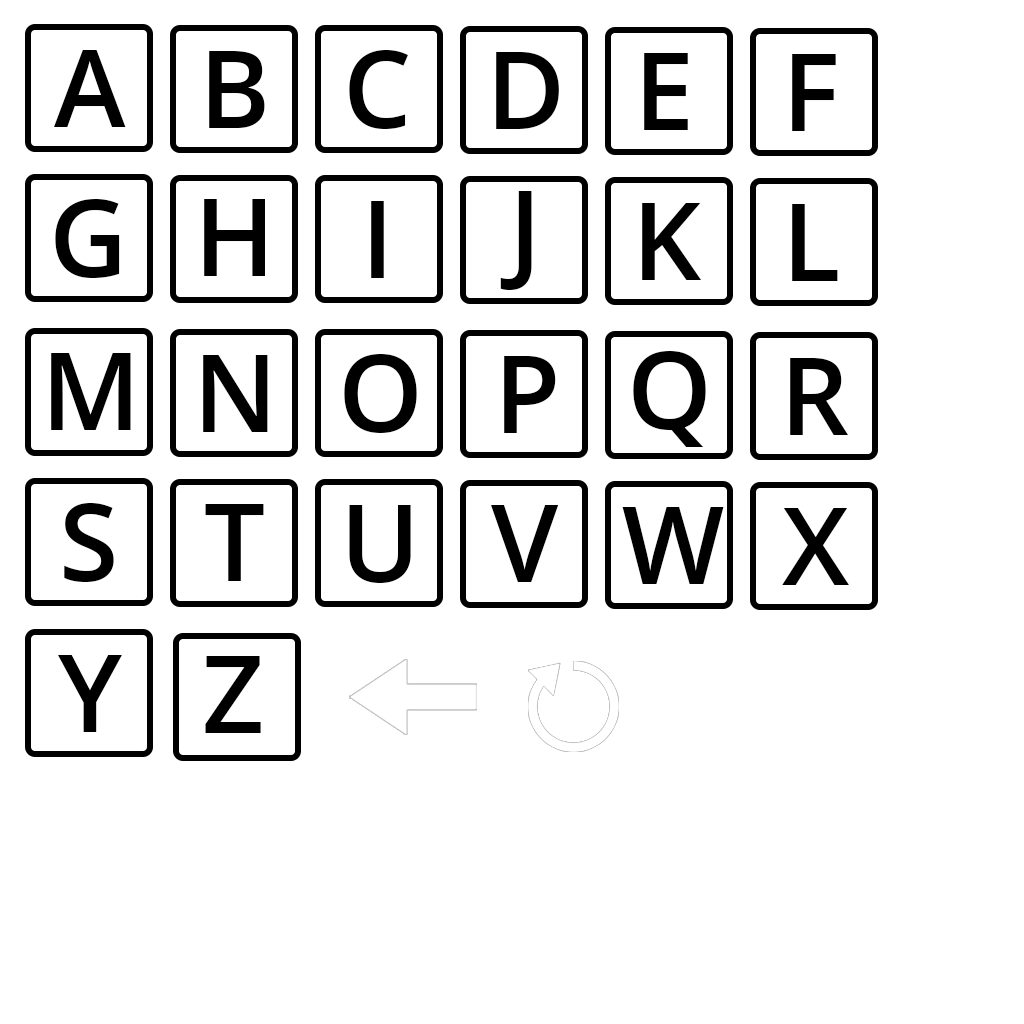
<style>
.page{position:relative;width:1024px;height:1024px;background:#ffffff}
.page>*{position:absolute;margin:0}
.t1{font:108.3px "OpenSans-Semibold";color:#000000}
</style>
<div class="page">
<p class="t1" style="left:54px;top:50px;width:72px;height:77px">A</p>
<p class="t1" style="left:209px;top:51px;width:56px;height:77px">B</p>
<p class="t1" style="left:349px;top:50px;width:59px;height:79px">C</p>
<p class="t1" style="left:496px;top:52px;width:63px;height:77px">D</p>
<p class="t1" style="left:644px;top:53px;width:44px;height:77px">E</p>
<p class="t1" style="left:792px;top:54px;width:44px;height:77px">F</p>
<p class="t1" style="left:500px;top:191px;width:32px;height:99px">J</p>
<p class="t1" style="left:55px;top:199px;width:65px;height:79px">G</p>
<p class="t1" style="left:204px;top:199px;width:61px;height:77px">H</p>
<p class="t1" style="left:371px;top:201px;width:13px;height:77px">I</p>
<p class="t1" style="left:642px;top:203px;width:60px;height:77px">K</p>
<p class="t1" style="left:792px;top:204px;width:46px;height:77px">L</p>
<p class="t1" style="left:51px;top:353px;width:80px;height:77px">M</p>
<p class="t1" style="left:633px;top:351px;width:73px;height:96px">Q</p>
<p class="t1" style="left:203px;top:355px;width:65px;height:77px">N</p>
<p class="t1" style="left:344px;top:354px;width:73px;height:79px">O</p>
<p class="t1" style="left:504px;top:356px;width:52px;height:77px">P</p>
<p class="t1" style="left:790px;top:358px;width:59px;height:77px">R</p>
<p class="t1" style="left:64px;top:503px;width:50px;height:79px">S</p>
<p class="t1" style="left:205px;top:504px;width:59px;height:77px">T</p>
<p class="t1" style="left:349px;top:505px;width:62px;height:78px">U</p>
<p class="t1" style="left:491px;top:505px;width:68px;height:77px">V</p>
<p class="t1" style="left:622px;top:507px;width:102px;height:77px">W</p>
<p class="t1" style="left:782px;top:508px;width:67px;height:77px">X</p>
<p class="t1" style="left:58px;top:655px;width:64px;height:77px">Y</p>
<p class="t1" style="left:205px;top:656px;width:56px;height:77px">Z</p>
</div>
